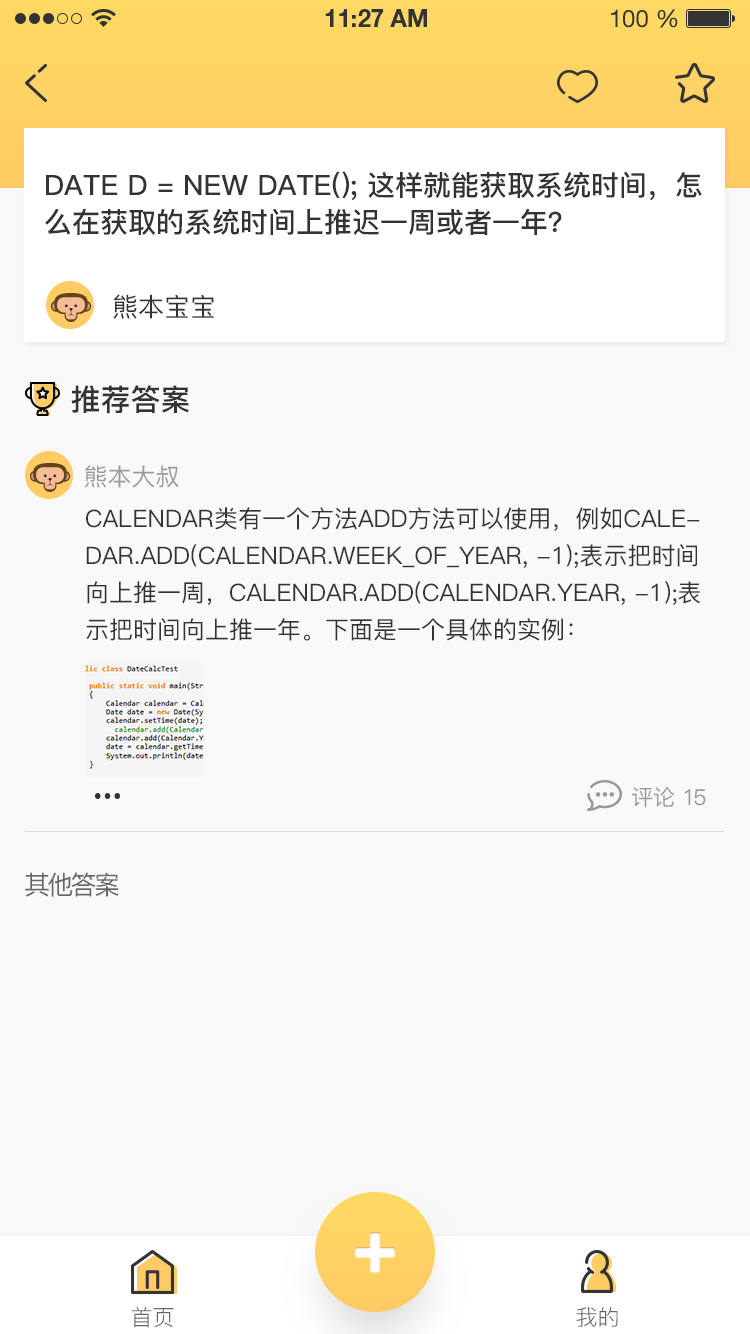
<style>
.page{position:relative;width:750px;height:1334px;background:#f9f9f9}
.page>*{position:absolute;margin:0}
.t1{font:28px/37px "PingFang-SC-Bold";color:#333333;text-transform:uppercase}
.t2{font:26px "PingFang-SC-Medium";color:#333333;text-transform:uppercase}
.t3{font:30px "PingFang-SC-Bold";color:#333333;text-transform:uppercase}
.t4{font:24px "PingFang-SC-Medium";color:#999999;text-transform:uppercase}
.t5{font:24px/37px "PingFang-SC-Medium";color:#333333;text-transform:uppercase}
.t6{font:22px "PingFang-SC-Medium";color:#999999;text-transform:uppercase}
.t7{font:22px "PingFang-SC-Medium";letter-spacing:-0.1em;color:#999999;text-transform:uppercase}
.t8{font:26px "PingFang-SC-Medium";letter-spacing:-0.1em;color:#666666;text-transform:uppercase}
.t9{font:22px "PingFang-SC-Regular";color:#666666;text-transform:uppercase}
</style>
<div class="page">
<p class="t1" style="left:45px;top:171px;width:657px;height:64px">Date d = new Date(); 这样就能获取系统时间，怎<br>么在获取的系统时间上推迟一周或者一年？</p>
<p class="t2" style="left:113px;top:294px;width:101px;height:25px">熊本宝宝</p>
<p class="t3" style="left:71px;top:385px;width:118px;height:29px">推荐答案</p>
<p class="t4" style="left:84px;top:465px;width:95px;height:23px">熊本大叔</p>
<p class="t5" style="left:86px;top:507px;width:614px;height:134px">Calendar类有一个方法add方法可以使用，例如caledar.add(Calendar.WEEK_OF_YEAR, -1);表示把时间<br>向上推一周，calendar.add(Calendar.YEAR, -1);表<br>示把时间向上推一年。下面是一个具体的实例：</p>
<p class="t6" style="left:632px;top:787px;width:74px;height:21px">评论 <span class="t7">15</span></p>
<p class="t8" style="left:25px;top:872px;width:94px;height:25px">其他答案</p>
<p class="t9" style="left:131px;top:1307px;width:43px;height:21px">首页</p>
<p class="t9" style="left:576px;top:1307px;width:42px;height:20px">我的</p>
</div>
